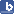
<style>
.page{position:relative;width:14px;height:14px;background:#3b5998}
.page>*{position:absolute;margin:0}
.t1{font:12.5px "MyriadPro-Bold";color:#ffffff}
</style>
<div class="page">
<p class="t1" style="left:5px;top:1px;width:8px;height:10px">b</p>
</div>
